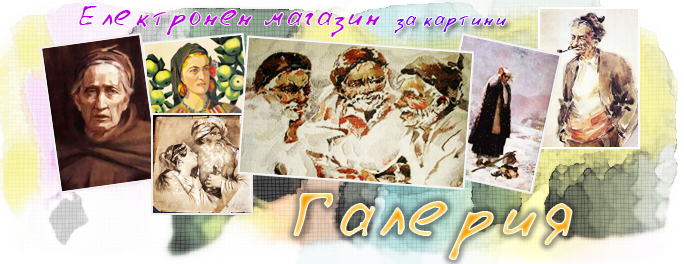
<style>
.page{position:relative;width:684px;height:264px}
.page>*{position:absolute;margin:0}
.t1{font:34px "LazyCrazy";color:#ba00e2}
.t2{font:23px "LazyCrazy";color:#7200ff}
.t3{font:78px "LazyCrazy"}
</style>
<div class="page">
<p class="t1" style="left:79px;top:6px;width:301px;height:31px">Електронен магазин</p>
<p class="t2" style="left:394px;top:16px;width:112px;height:17px">за картини</p>
<p class="t3" style="left:294px;top:194px;width:278px;height:65px">Галерия</p>
</div>
